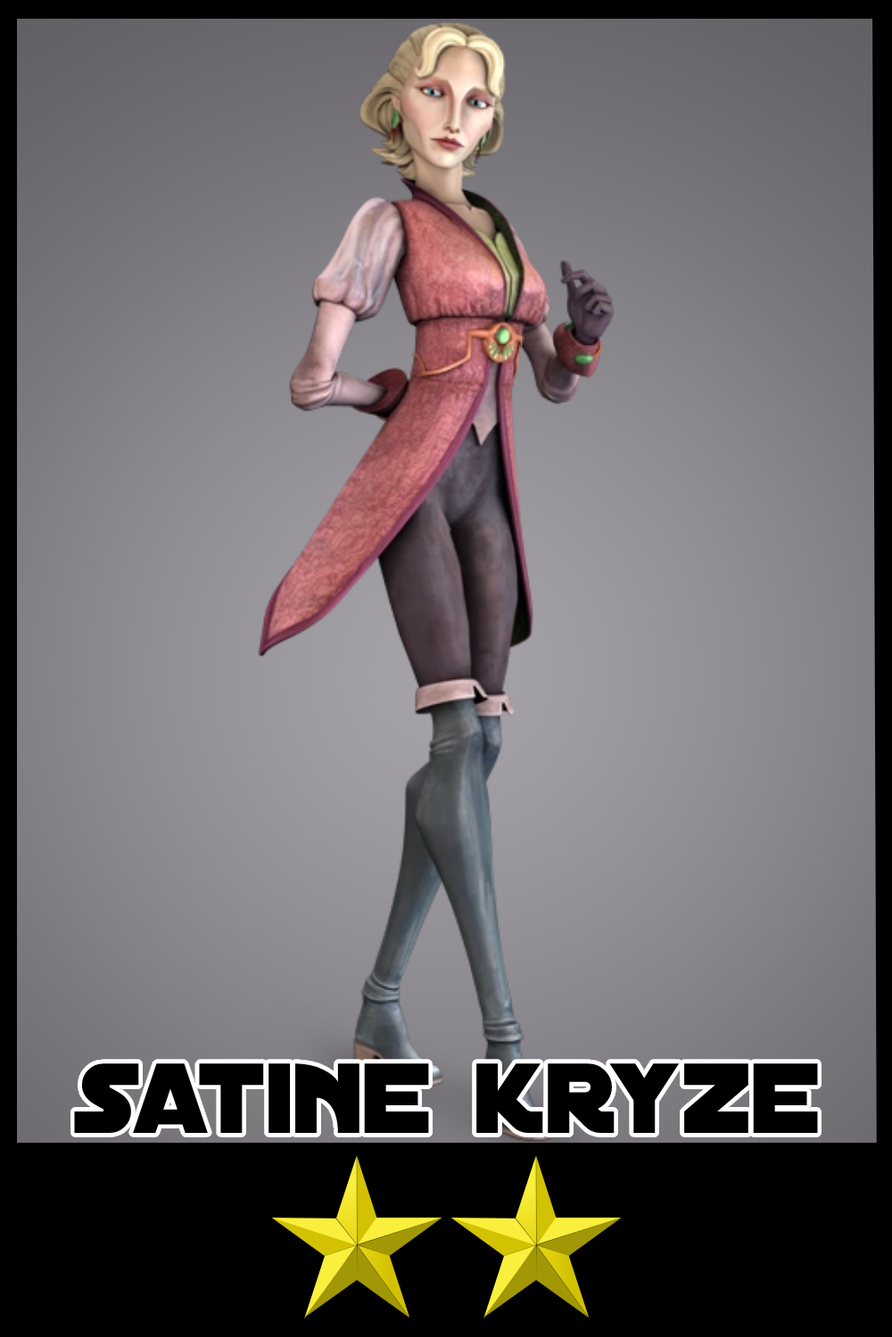
<style>
.page{position:relative;width:892px;height:1337px}
.page>*{position:absolute;margin:0}
.t1{font:106.5px "DistantGalaxy";color:#000000}
</style>
<div class="page">
<p class="t1" style="left:74px;top:1064px;width:744px;height:69px">satine kryze</p>
</div>
